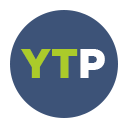
<style>
.page{position:relative;width:128px;height:128px;background:#3d5378}
.page>*{position:absolute;margin:0}
.t1{font:40.5px "Gotham-Black";color:#abcb2a;text-transform:uppercase}
.t2{font:40.5px "Gotham-Black";color:#ffffff;text-transform:uppercase}
</style>
<div class="page">
<p class="t1" style="left:20px;top:49px;width:85px;height:29px">YT<span class="t2">P</span></p>
</div>
